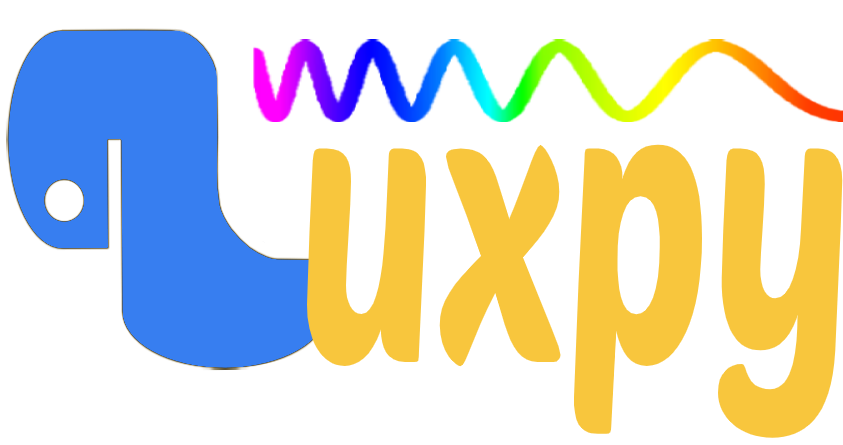
<style>
.page{position:relative;width:843px;height:445px;background:#ffffff}
.page>*{position:absolute;margin:0}
.t1{font:388.1px "PoetsenOne-Regular";color:#f8c63d;scale:0.6 1}
</style>
<div class="page">
<p class="t1" style="left:307px;top:144px;width:536px;height:294px">uxpy</p>
</div>
